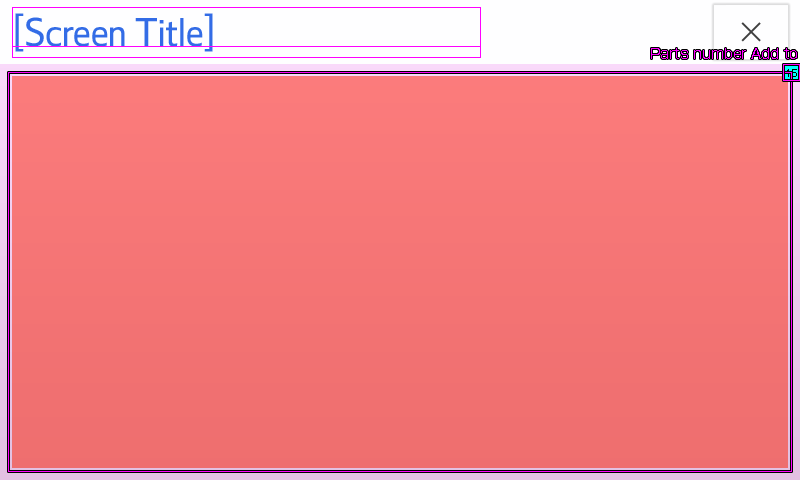
<style>
.page{position:relative;width:800px;height:480px}
.page>*{position:absolute;margin:0}
.t1{font:36px "Tfont1502_T1S";color:#336ce6}
.t2{font:14px "ShinGoPro-Regular";color:#ff00ff}
</style>
<div class="page">
<p class="t1" style="left:15px;top:13px;width:198px;height:39px">[Screen Title]</p>
<p class="t2" style="left:651px;top:48px;width:146px;height:11px">Parts number Add to</p>
</div>
